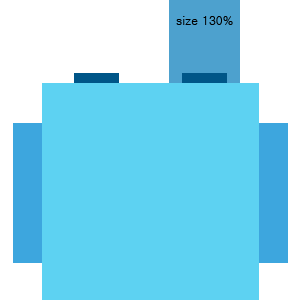
<style>
.page{position:relative;width:300px;height:300px;background:#5dd2f2}
.page>*{position:absolute;margin:0}
.t1{font:12px "Gulim";color:#000000}
</style>
<div class="page">
<p class="t1" style="left:176px;top:16px;width:57px;height:9px">size 130%</p>
</div>
